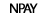
<style>
.page{position:relative;width:39px;height:16px;background:#ffffff}
.page>*{position:absolute;margin:0}
.t1{font:13px "MalgunGothicRegular";letter-spacing:-0.1em;color:#000000;font-weight:bold}
</style>
<div class="page">
<p class="t1" style="left:10px;top:3px;width:28px;height:10px">NPAY</p>
</div>
